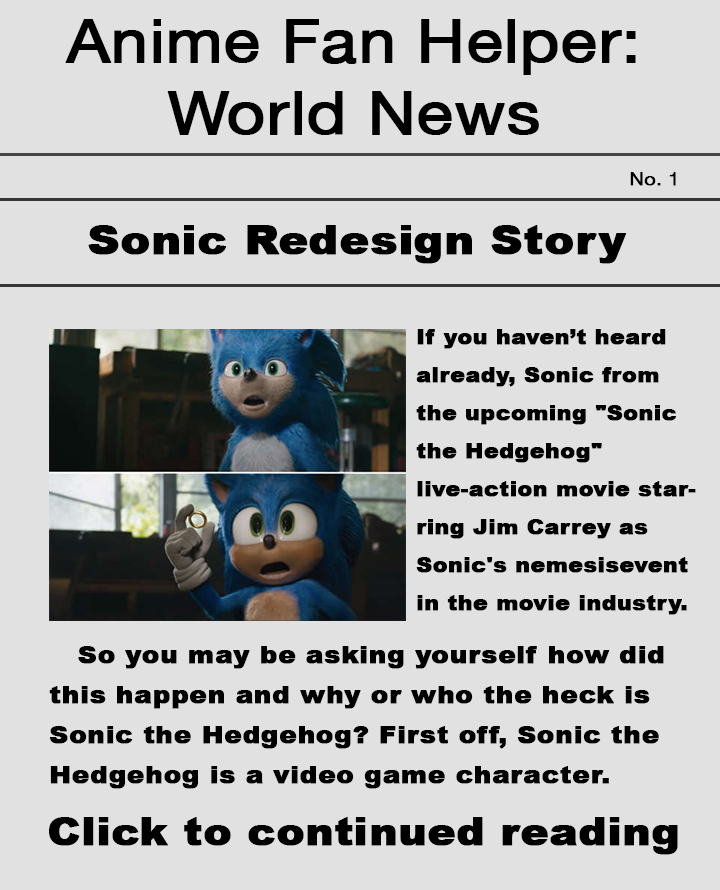
<style>
.page{position:relative;width:720px;height:890px;background:#e1e1e1}
.page>*{position:absolute;margin:0}
.t1{font:60px "HelveticaNeue";color:#000000;font-weight:bold;scale:1.1 1}
.t2{font:18px "HelveticaNeue";color:#000000;font-weight:bold;scale:1.1 1}
.t3{font:40px "Arial-Black";color:#000000;font-weight:bold;scale:1.1 1}
.t4{font:20px/38px "Arial-Black";color:#000000;font-weight:bold;scale:1.1 1}
.t5{font:24px/40px "Arial-Black";color:#000000;font-weight:bold;scale:1.1 1}
.t6{font:38px "Arial-Black";color:#000000;font-weight:bold;scale:1.1 1}
</style>
<div class="page">
<p class="t1" style="left:65px;top:19px;width:571px;height:116px;text-align:center">Anime Fan Helper: World News</p>
<p class="t2" style="left:630px;top:172px;width:46px;height:14px">No. 1</p>
<p class="t3" style="left:88px;top:225px;width:539px;height:39px">Sonic Redesign Story</p>
<p class="t4" style="left:416px;top:329px;width:280px;height:286px">If you haven’t heard already, Sonic from the upcoming "Sonic the Hedgehog" live-action movie starring Jim Carrey as Sonic's nemesisevent in the movie industry.</p>
<p class="t5" style="left:49px;top:646px;width:615px;height:143px">So you may be asking yourself how did this happen and why or who the heck is Sonic the Hedgehog? First off, Sonic the Hedgehog is a video game character.</p>
<p class="t6" style="left:49px;top:817px;width:629px;height:38px">Click to continued reading</p>
</div>
